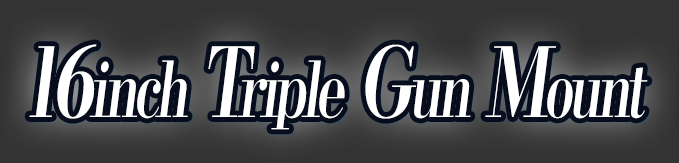
<style>
.page{position:relative;width:679px;height:163px}
.page>*{position:absolute;margin:0}
.t1{font:76.8px "KochoStd-Heavy";letter-spacing:-0.08em;color:#ffffff;font-style:italic;scale:0.71 1}
.t2{font:96px "KochoStd-Heavy";letter-spacing:-0.08em;color:#ffffff;font-style:italic;scale:0.71 1}
</style>
<div class="page">
<p class="t1" style="left:29px;top:44px;width:619px;height:86px"><span class="t2">16</span>inch<span class="t2"> T</span>riple<span class="t2"> G</span>un<span class="t2"> M</span>ount</p>
</div>
